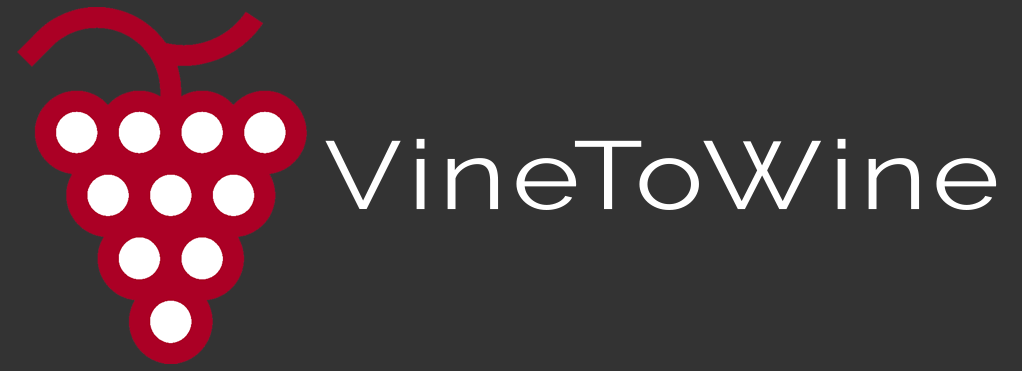
<style>
.page{position:relative;width:1022px;height:371px;background:#333333}
.page>*{position:absolute;margin:0}
.t1{font:96px "Raleway-Regular";letter-spacing:0.05em;color:#ffffff;scale:1.2 1}
</style>
<div class="page">
<p class="t1" style="left:325px;top:138px;width:672px;height:72px">VineToWine</p>
</div>
